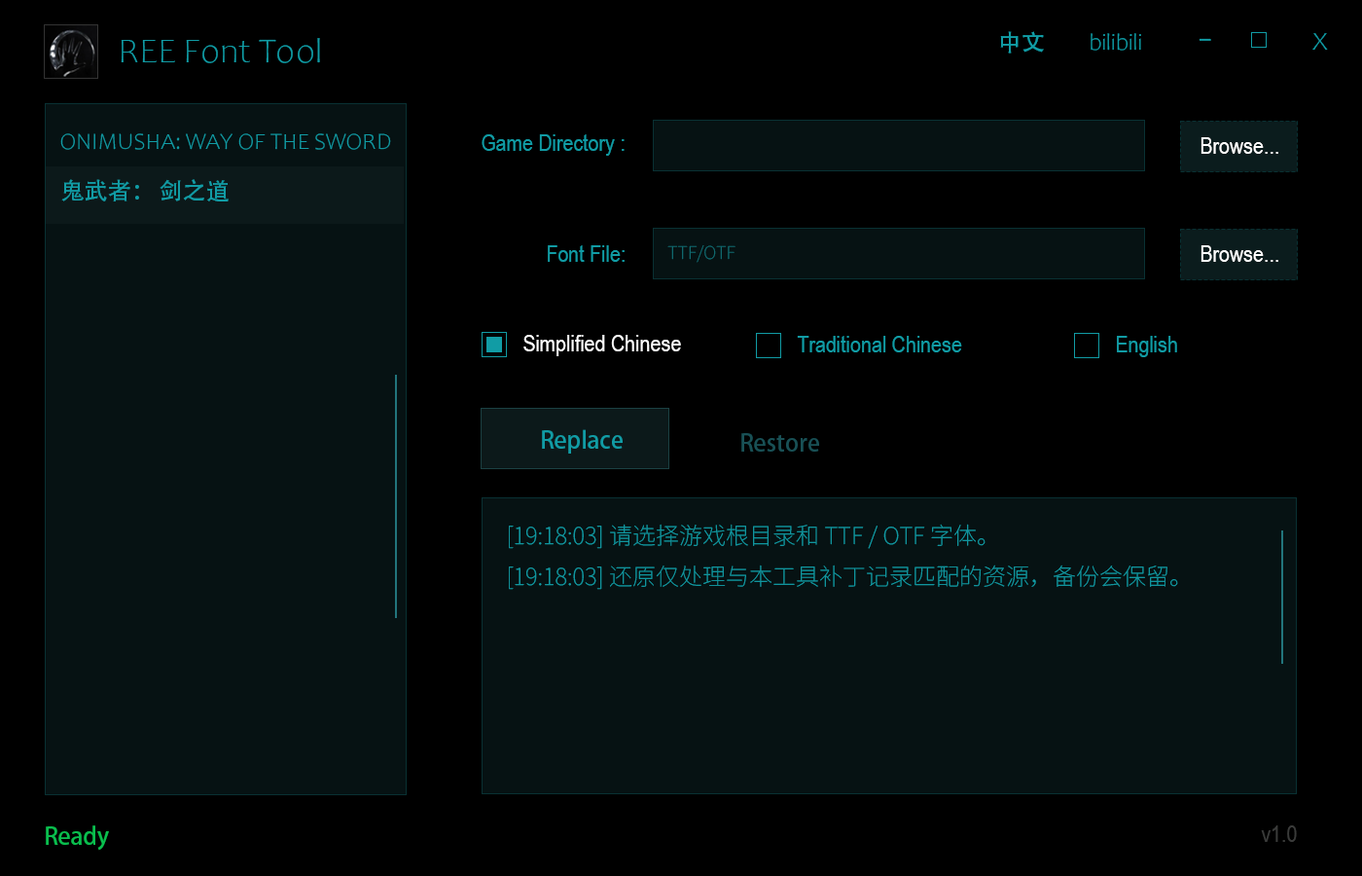
<style>
.page{position:relative;width:1362px;height:876px;background:#000000}
.page>*{position:absolute;margin:0}
.t1{font:35px "Candara-Light";color:#119ca5}
.t2{font:23.3px "AdobeHeitiStd-Regular";color:#119ca5}
.t3{font:23.3px "Candara-Light";color:#119ca5}
.t4{font:46.7px "NotoSansSC-Thin";color:#119ca5}
.t5{font:23.3px "ArialNarrow";color:#119ca5}
.t6{font:23.3px "ArialNarrow";color:#ffffff}
.t7{font:17.5px "NotoSansSC-Thin";color:#116c72}
.t8{font:23.3px "AdobeHeitiStd-Regular";color:#195055}
.t9{font:23.3px "NotoSansSC-Thin";color:#119ca5}
.t10{font:23.3px "AdobeHeitiStd-Regular";color:#0abe4e}
.t11{font:23.3px "ArialNarrow";color:#3a3b3a}
</style>
<div class="page">
<p class="t1" style="left:121px;top:38px;width:199px;height:25px">REE Font Tool</p>
<p class="t2" style="left:1000px;top:31px;width:44px;height:23px">中文</p>
<p class="t3" style="left:1091px;top:33px;width:50px;height:18px">bilibili</p>
<p class="t4" style="left:1199px;top:38px;width:12px;height:3px">-</p>
<p class="t1" style="left:1312px;top:33px;width:16px;height:18px">x</p>
<p class="t3" style="left:60px;top:133px;width:331px;height:17px">ONIMUSHA: WAY OF THE SWORD</p>
<p class="t5" style="left:482px;top:134px;width:143px;height:22px">Game Directory :</p>
<p class="t6" style="left:1200px;top:137px;width:78px;height:17px">Browse...</p>
<p class="t2" style="left:61px;top:179px;width:168px;height:22px">鬼武者： 剑之道</p>
<p class="t5" style="left:548px;top:245px;width:77px;height:17px">Font File:</p>
<p class="t7" style="left:667px;top:245px;width:68px;height:18px">TTF/OTF</p>
<p class="t6" style="left:1200px;top:245px;width:78px;height:17px">Browse...</p>
<p class="t6" style="left:523px;top:335px;width:158px;height:21px">Simplified Chinese</p>
<p class="t5" style="left:797px;top:336px;width:165px;height:16px">Traditional Chinese</p>
<p class="t5" style="left:1117px;top:336px;width:60px;height:21px">English</p>
<p class="t2" style="left:542px;top:429px;width:81px;height:24px">Replace</p>
<p class="t8" style="left:741px;top:433px;width:78px;height:18px">Restore</p>
<p class="t9" style="left:509px;top:523px;width:669px;height:67px">[19:18:03] 请选择游戏根目录和 TTF / OTF 字体。<br>[19:18:03] 还原仅处理与本工具补丁记录匹配的资源，备份会保留。</p>
<p class="t10" style="left:46px;top:825px;width:63px;height:25px">Ready</p>
<p class="t11" style="left:1261px;top:825px;width:36px;height:16px">v1.0</p>
</div>
